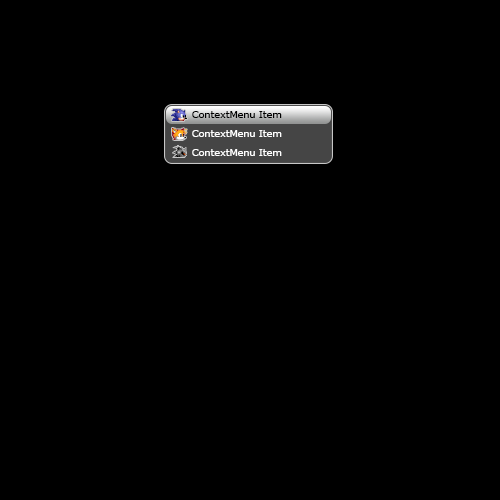
<style>
.page{position:relative;width:500px;height:500px;background:#000000}
.page>*{position:absolute;margin:0}
.t1{font:10.4px "Verdana";color:#000000;scale:0.92 1}
.t2{font:10.4px "Verdana";color:#ffffff;scale:0.92 1}
</style>
<div class="page">
<p class="t1" style="left:192px;top:111px;width:90px;height:7px">ContextMenu Item</p>
<p class="t1" style="left:192px;top:111px;width:90px;height:7px">ContextMenu Item</p>
<p class="t2" style="left:192px;top:130px;width:90px;height:7px">ContextMenu Item</p>
<p class="t2" style="left:192px;top:149px;width:90px;height:7px">ContextMenu Item</p>
</div>
